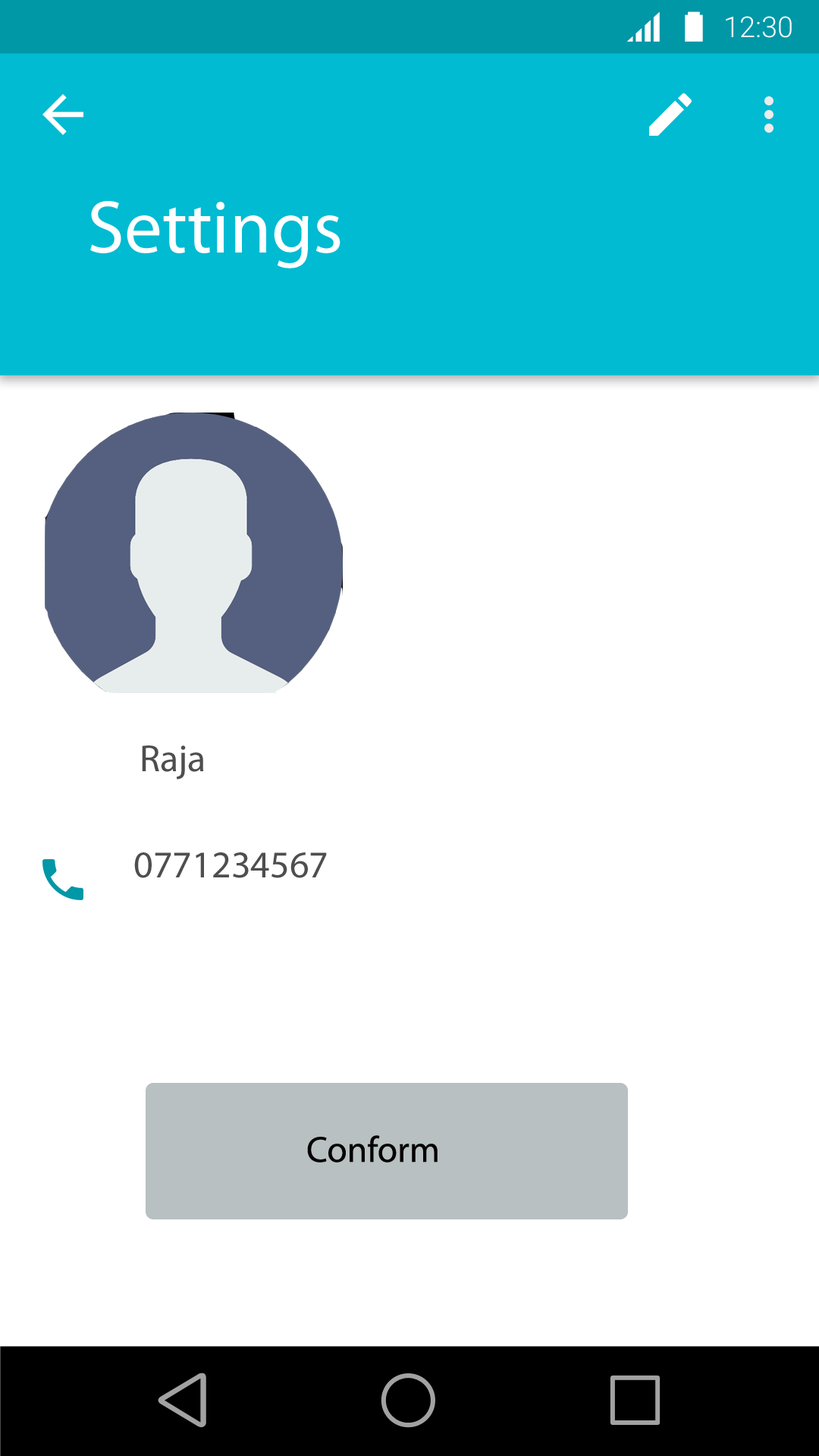
<style>
.page{position:relative;width:819px;height:1456px;background:#ffffff}
.page>*{position:absolute;margin:0}
.t1{font:28.8px "Roboto-Light";color:#ffffff}
.t2{font:75.4px "MyriadPro-Regular";color:#ffffff}
.t3{font:38px "MyriadPro-Regular";color:#4e4e4e}
.t4{font:36.4px "MyriadPro-Regular";color:#050101}
</style>
<div class="page">
<p class="t1" style="left:726px;top:16px;width:66px;height:22px">12:30</p>
<p class="t2" style="left:90px;top:201px;width:250px;height:67px">Settings</p>
<p class="t3" style="left:142px;top:745px;width:62px;height:35px">Raja</p>
<p class="t3" style="left:134px;top:852px;width:193px;height:26px">0771234567</p>
<p class="t4" style="left:307px;top:1135px;width:131px;height:28px">Conform</p>
</div>
